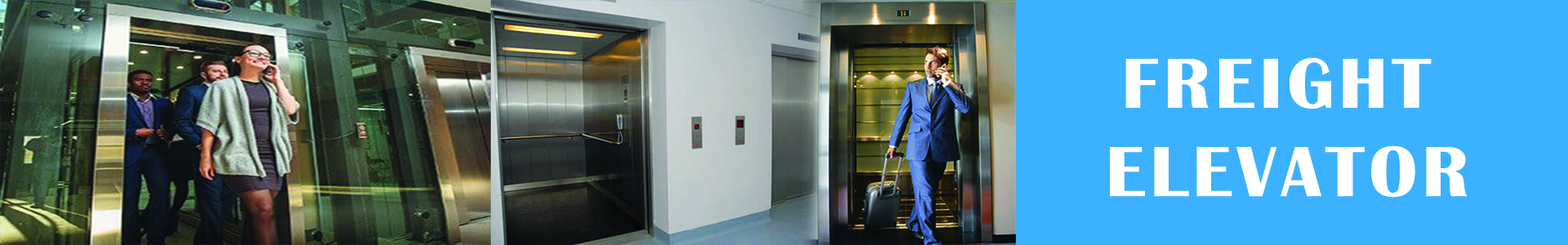
<style>
.page{position:relative;width:1568px;height:245px;background:#3cb2ff}
.page>*{position:absolute;margin:0}
.t1{font:73.5px "BritannicBold";letter-spacing:0.07em;color:#ffffff}
</style>
<div class="page">
<p class="t1" style="left:1110px;top:58px;width:358px;height:140px;text-align:center">FREIGHT <br>ELEVATOR</p>
</div>
